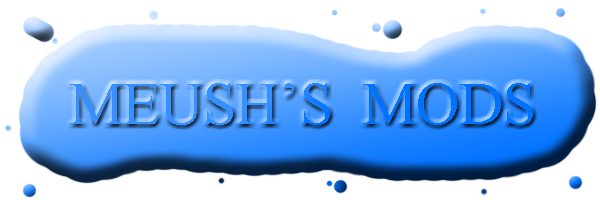
<style>
.page{position:relative;width:600px;height:200px;background:#ffffff}
.page>*{position:absolute;margin:0}
.t1{font:60px "TimesNewRomanPSMT"}
</style>
<div class="page">
<p class="t1" style="left:70px;top:83px;width:463px;height:42px">MEUSH’S  MODS</p>
</div>
